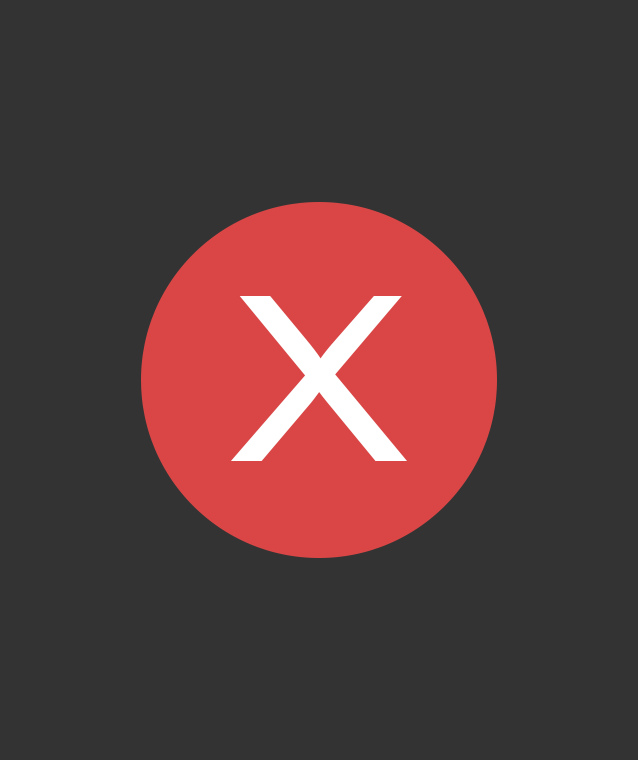
<style>
.page{position:relative;width:638px;height:760px;background:#333333}
.page>*{position:absolute;margin:0}
.t1{font:229.9px "ArialMT";color:#ffffff;scale:1.17 1}
</style>
<div class="page">
<p class="t1" style="left:231px;top:296px;width:176px;height:165px">X</p>
</div>
